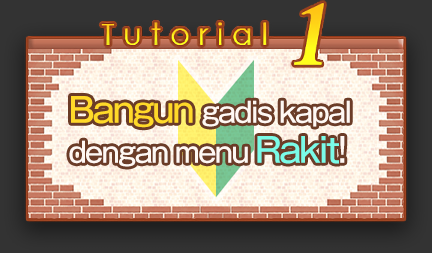
<style>
.page{position:relative;width:432px;height:253px}
.page>*{position:absolute;margin:0}
.t1{font:28px/40px "GothicMB101Pro-Medium";letter-spacing:-0.06em;color:#fff8f3;scale:0.95 1}
.t2{font:34px/40px "GothicMB101Pro-Medium";letter-spacing:-0.06em;color:#ffd929;scale:0.95 1}
.t3{font:34px/40px "GothicMB101Pro-Medium";letter-spacing:-0.06em;color:#7afbe7;scale:0.95 1}
.t4{font:34px/40px "GothicMB101Pro-Medium";letter-spacing:-0.06em;color:#fff8f3;scale:0.95 1}
</style>
<div class="page">
<p class="t1" style="left:69px;top:96px;width:281px;height:71px"><span class="t2">Bangun </span>gadis kapal<br>dengan menu <span class="t3">Rakit</span><span class="t4">!</span></p>
</div>
